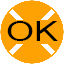
<style>
.page{position:relative;width:64px;height:64px;background:#fea203}
.page>*{position:absolute;margin:0}
.t1{font:27.4px "ArialMT";color:#010100;scale:1.32 1}
</style>
<div class="page">
<p class="t1" style="left:7px;top:21px;width:51px;height:20px">OK</p>
</div>
